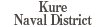
<style>
.page{position:relative;width:103px;height:27px;background:#ffffff}
.page>*{position:absolute;margin:0}
.t1{font:14px/13px "RyuminPro-ExBold";letter-spacing:-0.04em;color:#4c4843;scale:0.9 1}
</style>
<div class="page">
<p class="t1" style="left:14px;top:1px;width:78px;height:25px;text-align:center">Kure<br>Naval District</p>
</div>
